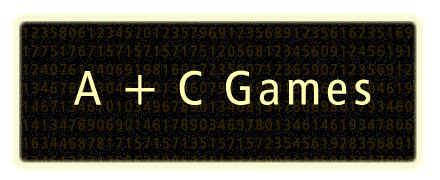
<style>
.page{position:relative;width:440px;height:180px;background:#000000}
.page>*{position:absolute;margin:0}
.t1{font:47.8px "CarlosNoseven";letter-spacing:0.13em;color:#fffeb2}
</style>
<div class="page">
<p class="t1" style="left:74px;top:70px;width:297px;height:35px">A + C Games</p>
</div>
